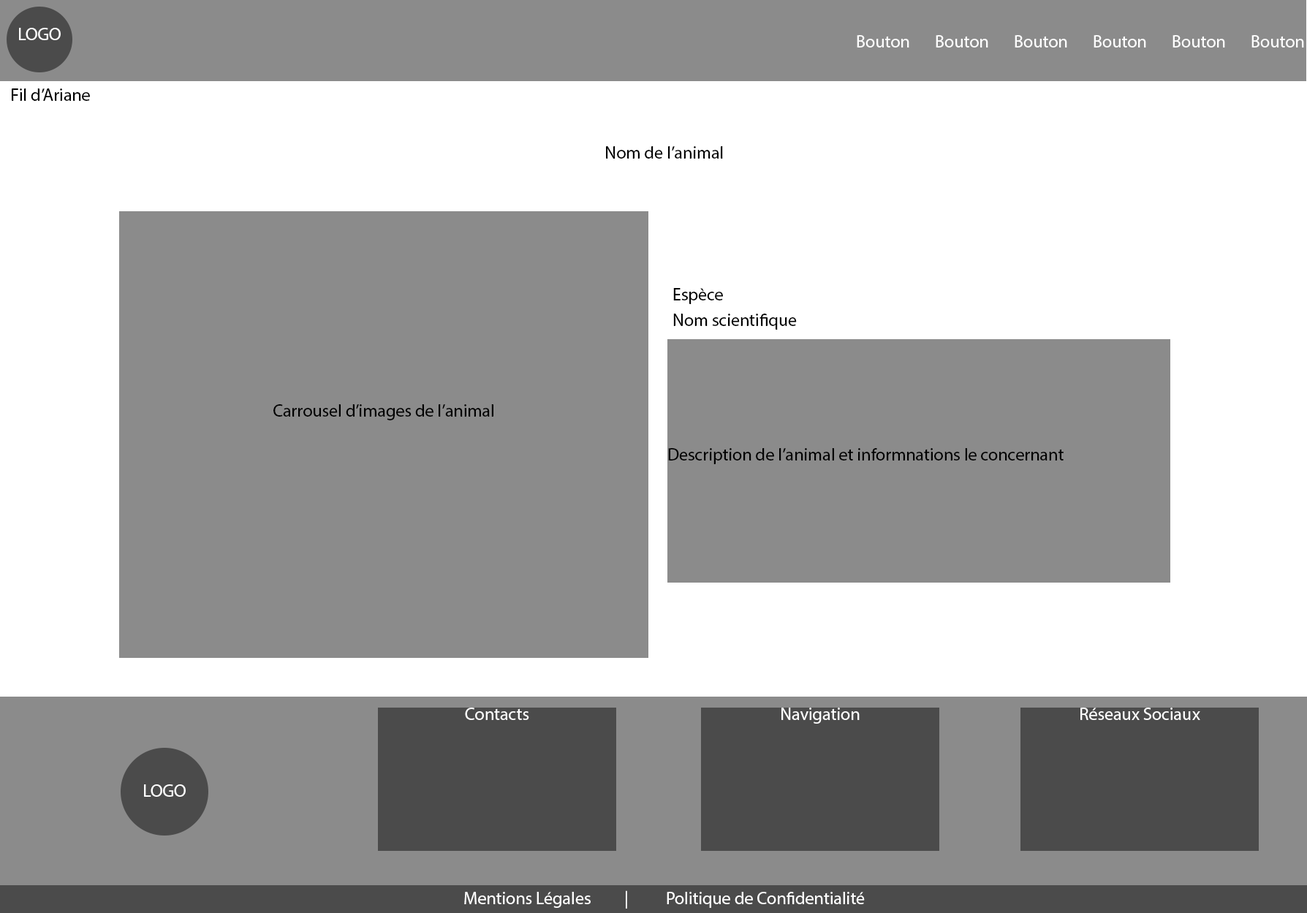
<style>
.page{position:relative;width:1307px;height:913px;background:#8b8b8b}
.page>*{position:absolute;margin:0}
.t1{font:17.5px "MyriadPro-Regular";color:#fefefe}
.t2{font:17.5px "MyriadPro-Regular";color:#000000}
.t3{font:17.5px "MyriadPro-Regular";color:#ffffff}
</style>
<div class="page">
<p class="t1" style="left:19px;top:28px;width:42px;height:12px">LOGO</p>
<p class="t1" style="left:856px;top:35px;width:448px;height:12px">Bouton Bouton Bouton Bouton Bouton Bouton</p>
<p class="t2" style="left:12px;top:88px;width:78px;height:13px">Fil d’Ariane</p>
<p class="t2" style="left:606px;top:146px;width:117px;height:13px">Nom de l’animal</p>
<p class="t2" style="left:673px;top:288px;width:50px;height:16px">Espèce</p>
<p class="t2" style="left:673px;top:313px;width:123px;height:17px">Nom scientifique</p>
<p class="t2" style="left:273px;top:404px;width:220px;height:16px">Carrousel d’images de l’animal</p>
<p class="t2" style="left:668px;top:448px;width:395px;height:16px">Description de l’animal et informnations le concernant</p>
<p class="t3" style="left:465px;top:707px;width:64px;height:13px">Contacts</p>
<p class="t3" style="left:781px;top:707px;width:78px;height:16px">Navigation</p>
<p class="t3" style="left:1080px;top:707px;width:120px;height:13px">Réseaux Sociaux</p>
<p class="t3" style="left:144px;top:784px;width:42px;height:12px">LOGO</p>
<p class="t3" style="left:464px;top:890px;width:400px;height:18px">Mentions Légales         |          Politique de Confidentialité</p>
</div>
